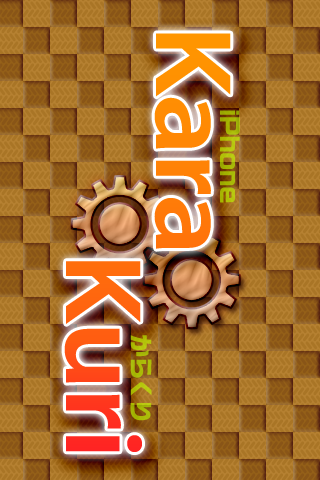
<style>
.page{position:relative;width:320px;height:480px}
.page>*{position:absolute;margin:0}
.t1{font:110px "MyriadPro-Semibold";letter-spacing:-0.01em;scale:1.1 1}
.t2{font:24px "RFGSanSrf-Bd-83pv-RKSJ-H";color:#a9b906}
.t3{font:24px "RFGSanSrf-Bd-83pv-RKSJ-H";color:#aabb08}
</style>
<div class="page">
<p class="t1" style="left:64px;top:33px;width:167px;height:419px;rotate:90deg">KaraKuri</p>
<p class="t2" style="left:220px;top:110px;width:20px;height:93px;rotate:90deg">iPhone</p>
<p class="t3" style="left:130px;top:335px;width:22px;height:86px;rotate:90deg">からくり</p>
</div>
